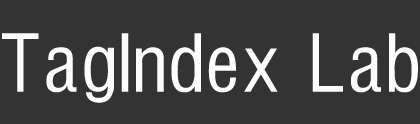
<style>
.page{position:relative;width:420px;height:124px;background:#333333}
.page>*{position:absolute;margin:0}
.t1{font:78px "FZYTK--GBK1-0";letter-spacing:0.1em;color:#fefbfd}
</style>
<div class="page">
<p class="t1" style="left:2px;top:33px;width:416px;height:70px">TagIndex Lab</p>
</div>
